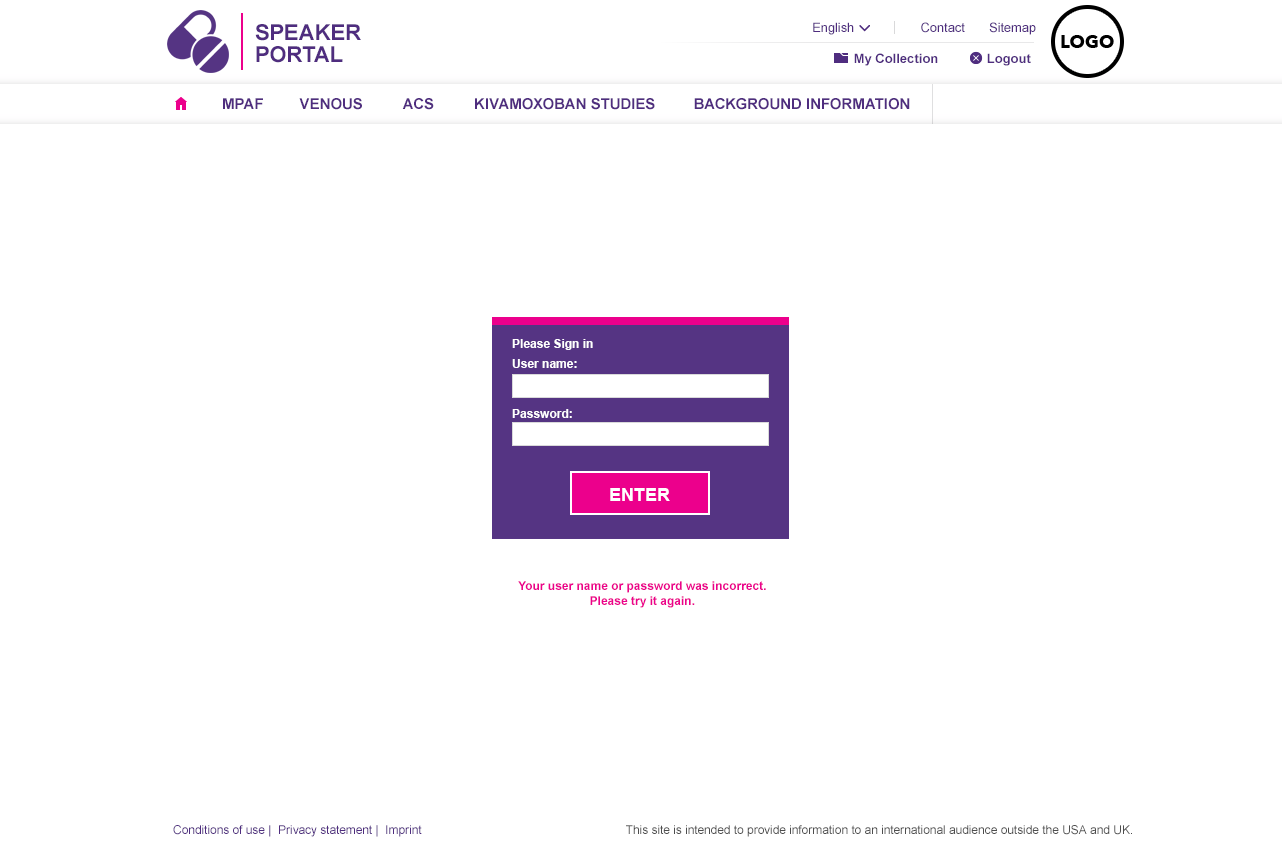
<style>
.page{position:relative;width:1282px;height:859px;background:#ffffff}
.page>*{position:absolute;margin:0}
.t1{font:22px/22px "Arial-BoldMT";color:#4f2d7f;text-transform:uppercase}
.t2{font:13px "ArialMT";color:#4f2d7f}
.t3{font:13px "Arial-BoldMT";color:#4f2d7f}
.t4{font:15px "Arial-BoldMT";color:#4f2d7f;text-transform:uppercase}
.t5{font:12px "Arial-BoldMT";color:#ffffff}
.t6{font:18px "Arial-BoldMT";color:#ffffff;text-transform:uppercase}
.t7{font:12px "Arial-BoldMT";color:#ec008c}
.t8{font:12px "ArialMT";color:#4f2d7f}
.t9{font:12px "ArialMT";color:#4d4d4d}
</style>
<div class="page">
<p class="t1" style="left:255px;top:24px;width:106px;height:39px">Speaker<br>Portal</p>
<p class="t2" style="left:813px;top:22px;width:41px;height:13px">English</p>
<p class="t2" style="left:921px;top:22px;width:44px;height:11px">Contact</p>
<p class="t2" style="left:989px;top:22px;width:47px;height:13px">Sitemap</p>
<p class="t3" style="left:854px;top:53px;width:84px;height:13px">My Collection</p>
<p class="t3" style="left:987px;top:53px;width:44px;height:13px">Logout</p>
<p class="t4" style="left:223px;top:98px;width:40px;height:11px">MPAF</p>
<p class="t4" style="left:299px;top:98px;width:63px;height:12px">Venous</p>
<p class="t4" style="left:402px;top:98px;width:32px;height:12px">ACS</p>
<p class="t4" style="left:475px;top:98px;width:180px;height:12px">KivaMoxOban studies</p>
<p class="t4" style="left:694px;top:98px;width:216px;height:12px">Background information</p>
<p class="t5" style="left:512px;top:339px;width:81px;height:11px">Please Sign in</p>
<p class="t5" style="left:512px;top:359px;width:65px;height:9px">User name:</p>
<p class="t5" style="left:512px;top:409px;width:60px;height:9px">Password:</p>
<p class="t6" style="left:610px;top:488px;width:60px;height:13px">Enter</p>
<p class="t7" style="left:518px;top:581px;width:248px;height:27px;text-align:center">Your user name or password was incorrect.<br>Please try it again.</p>
<p class="t8" style="left:173px;top:825px;width:249px;height:12px">Conditions of use |  Privacy statement |  Imprint</p>
<p class="t9" style="left:626px;top:825px;width:506px;height:12px">This site is intended to provide information to an international audience outside the USA and UK.</p>
</div>
